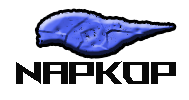
<style>
.page{position:relative;width:189px;height:100px;background:#ffffff}
.page>*{position:absolute;margin:0}
.t1{font:32px "ROGFonts-Regular";letter-spacing:-0.01em;color:#090909}
</style>
<div class="page">
<p class="t1" style="left:16px;top:61px;width:160px;height:23px">Napkop</p>
</div>
